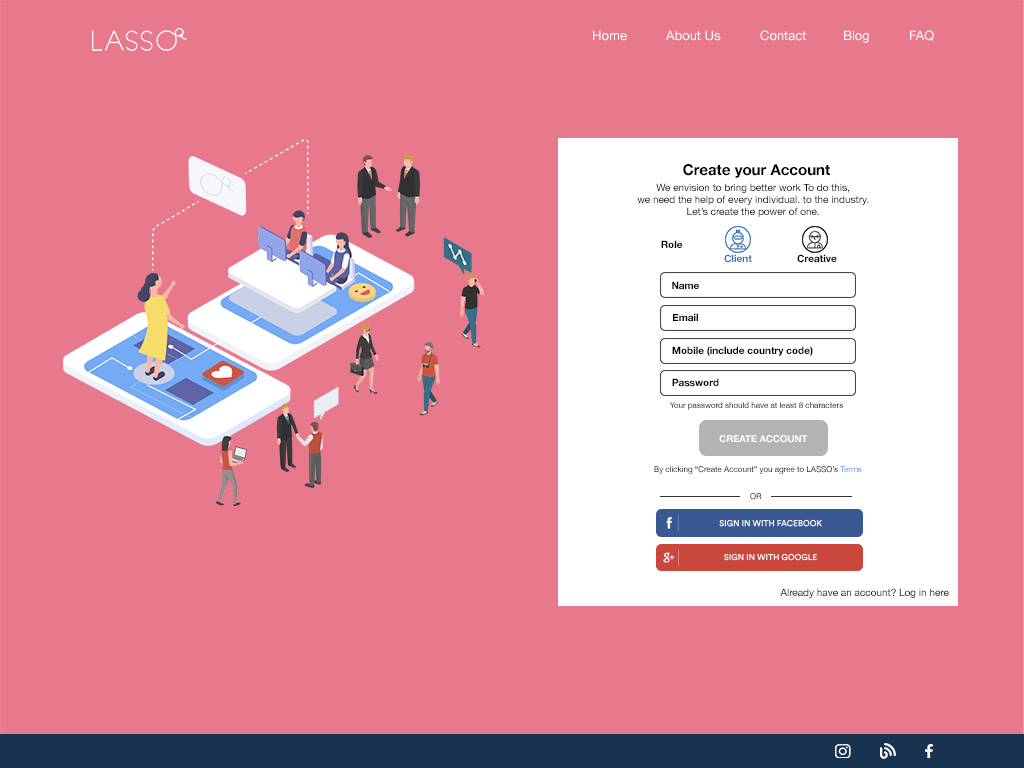
<style>
.page{position:relative;width:1024px;height:768px;background:#e8798c}
.page>*{position:absolute;margin:0}
.t1{font:13px "HelveticaNeue";color:#fafafa}
.t2{font:15px "HelveticaNeue-Bold";color:#000000}
.t3{font:10px/12px "HelveticaNeue";color:#000000}
.t4{font:10px "HelveticaNeue-Bold";color:#000000}
.t5{font:10px "HelveticaNeue-Bold";color:#3e74b5}
.t6{font:8px "HelveticaNeue"}
.t7{font:9.5px "HelveticaNeue-Bold";color:#ffffff;text-transform:uppercase}
.t8{font:10px "HelveticaNeue";color:#000000}
</style>
<div class="page">
<p class="t1" style="left:593px;top:30px;width:34px;height:11px">Home</p>
<p class="t1" style="left:666px;top:30px;width:55px;height:11px">About Us</p>
<p class="t1" style="left:760px;top:30px;width:46px;height:11px">Contact</p>
<p class="t1" style="left:844px;top:30px;width:25px;height:13px">Blog</p>
<p class="t1" style="left:910px;top:30px;width:24px;height:11px">FAQ</p>
<p class="t2" style="left:683px;top:164px;width:147px;height:14px">Create your Account</p>
<p class="t3" style="left:637px;top:183px;width:232px;height:34px;text-align:center">We envision to bring better work To do this, <br>we need the help of every individual. to the industry. Let’s create the power of one.</p>
<p class="t4" style="left:661px;top:240px;width:22px;height:8px">Role</p>
<p class="t5" style="left:724px;top:254px;width:28px;height:9px">Client</p>
<p class="t4" style="left:797px;top:254px;width:40px;height:9px">Creative</p>
<p class="t4" style="left:672px;top:281px;width:27px;height:9px">Name</p>
<p class="t4" style="left:673px;top:313px;width:25px;height:9px">Email</p>
<p class="t4" style="left:672px;top:346px;width:141px;height:10px">Mobile (include country code)</p>
<p class="t4" style="left:672px;top:378px;width:47px;height:9px">Password</p>
<p class="t6" style="left:669px;top:402px;width:174px;height:8px">Your password should have at least 8 characters</p>
<p class="t7" style="left:719px;top:435px;width:89px;height:8px">Create Account</p>
<p class="t6" style="left:654px;top:466px;width:208px;height:8px">By clicking “Create Account” you agree to LASSO’s Terms</p>
<p class="t6" style="left:750px;top:493px;width:12px;height:7px">OR</p>
<p class="t8" style="left:780px;top:588px;width:169px;height:10px">Already have an account? Log in here</p>
</div>
